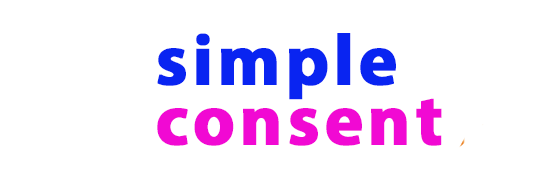
<style>
.page{position:relative;width:539px;height:180px;background:#ffffff}
.page>*{position:absolute;margin:0}
.t1{font:72px/30px "MyriadPro-Bold";letter-spacing:0.05em;color:#f109d3;font-weight:bold}
.t2{font:72px/30px "MyriadPro-Bold";letter-spacing:0.05em;color:#0924f1;font-weight:bold}
</style>
<div class="page">
<p class="t1" style="left:157px;top:33px;width:285px;height:113px"><span class="t2">simple<br><br></span>consent</p>
</div>
